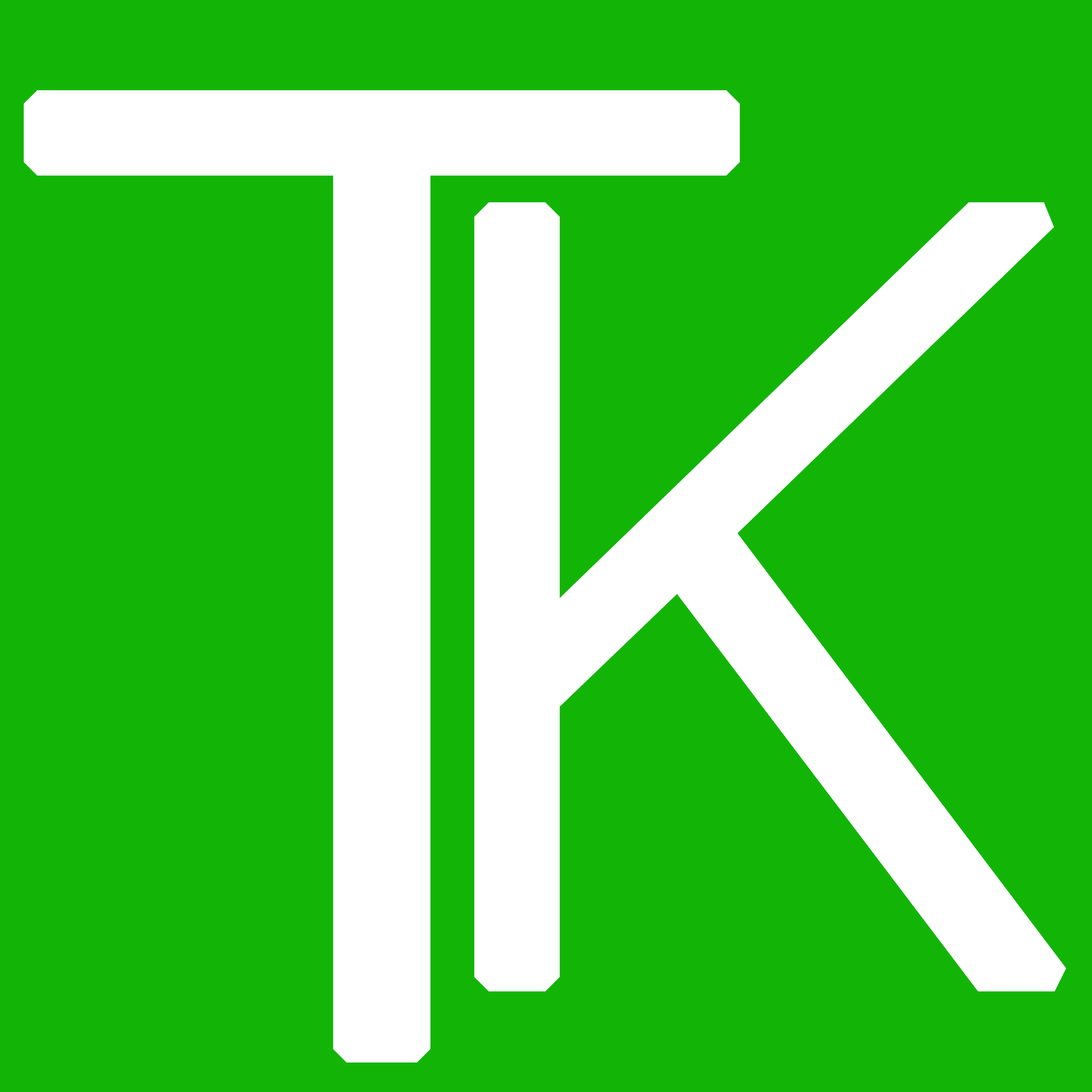
<style>
.page{position:relative;width:1092px;height:1092px;background:#12b506}
.page>*{position:absolute;margin:0}
.t1{font:1327.7px "CreatoDisplay-Light";color:#ffffff;text-transform:uppercase;font-weight:bold}
.t2{font:1067.7px "CreatoDisplay-Light";color:#ffffff;text-transform:uppercase;font-weight:bold}
</style>
<div class="page">
<p class="t1" style="left:24px;top:90px;width:716px;height:973px">t</p>
<p class="t2" style="left:474px;top:202px;width:592px;height:790px">k</p>
</div>
